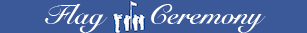
<style>
.page{position:relative;width:307px;height:33px;background:#3b5998}
.page>*{position:absolute;margin:0}
.t1{font:28px "SnellRoundhand-Bold";color:#ffffff}
</style>
<div class="page">
<p class="t1" style="left:45px;top:4px;width:221px;height:29px">Flag      Ceremony</p>
</div>
